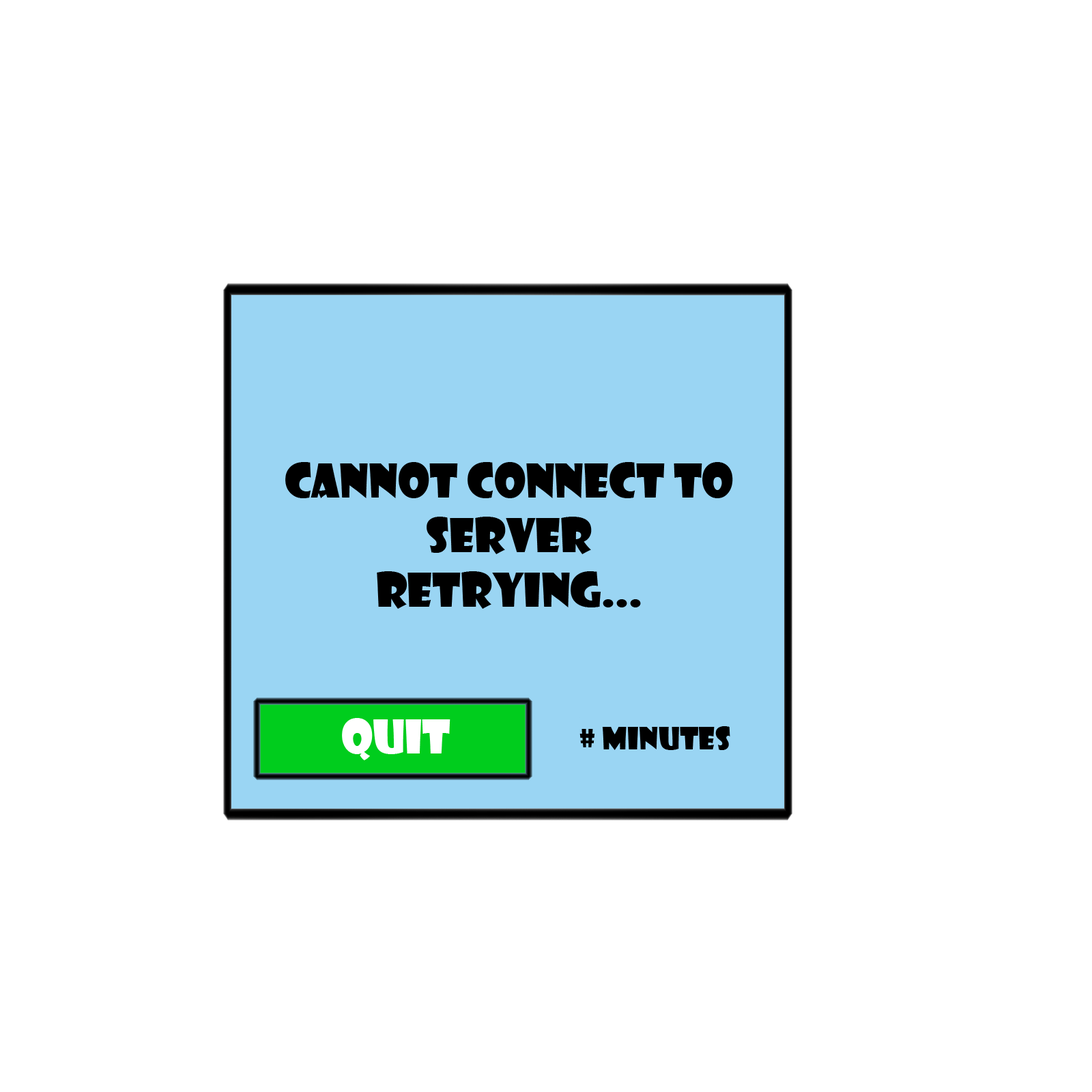
<style>
.page{position:relative;width:1092px;height:1092px;background:#ffffff}
.page>*{position:absolute;margin:0}
.t1{font:45.5px "ShowcardGothic-Reg";color:#000000}
.t2{font:45.5px "ShowcardGothic-Reg";color:#ffffff}
.t3{font:30.3px "ShowcardGothic-Reg";color:#000000}
</style>
<div class="page">
<p class="t1" style="left:285px;top:462px;width:448px;height:147px;text-align:center">Cannot Connect To Server<br>Retrying...</p>
<p class="t2" style="left:342px;top:718px;width:108px;height:42px">Quit</p>
<p class="t3" style="left:579px;top:726px;width:151px;height:24px"># Minutes</p>
</div>
